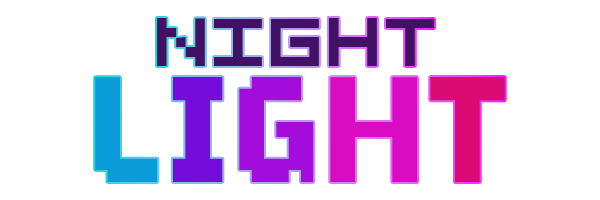
<style>
.page{position:relative;width:600px;height:200px;background:#ffffff}
.page>*{position:absolute;margin:0}
.t1{font:122.9px "VisitorTT2-BRK-";color:#401164}
.t2{font:127.5px "BrokenConsole-Bold";color:#0c9cda;scale:1.07 1}
.t3{font:127.5px "BrokenConsole-Bold";color:#760cda;scale:1.07 1}
.t4{font:127.5px "BrokenConsole-Bold";color:#a30cda;scale:1.07 1}
.t5{font:127.5px "BrokenConsole-Bold";color:#da0cc2;scale:1.07 1}
.t6{font:127.5px "BrokenConsole-Bold";color:#da0c73;scale:1.07 1}
</style>
<div class="page">
<p class="t1" style="left:157px;top:17px;width:277px;height:49px">NIGHT</p>
<p class="t2" style="left:95px;top:77px;width:410px;height:105px">L<span class="t3">I</span><span class="t4">G</span><span class="t5">H</span><span class="t6">T</span></p>
</div>
